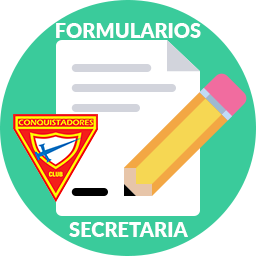
<style>
.page{position:relative;width:256px;height:256px;background:#ffffff}
.page>*{position:absolute;margin:0}
.t1{font:20px "Lato-Black";color:#ffffff}
</style>
<div class="page">
<p class="t1" style="left:56px;top:23px;width:145px;height:15px">FORMULARIOS</p>
<p class="t1" style="left:69px;top:222px;width:119px;height:15px">SECRETARIA</p>
</div>
